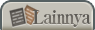
<style>
.page{position:relative;width:95px;height:30px;background:#c5c2b9}
.page>*{position:absolute;margin:0}
.t1{font:19px "RyuminPro-ExBold";letter-spacing:-0.08em;color:#716d66;scale:0.9 1}
</style>
<div class="page">
<p class="t1" style="left:32px;top:10px;width:59px;height:17px">Lainnya</p>
</div>
